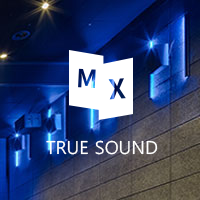
<style>
.page{position:relative;width:200px;height:200px}
.page>*{position:absolute;margin:0}
.t1{font:18px "MalgunGothicRegular";color:#ffffff}
</style>
<div class="page">
<p class="t1" style="left:46px;top:140px;width:112px;height:15px">TRUE SOUND</p>
</div>
